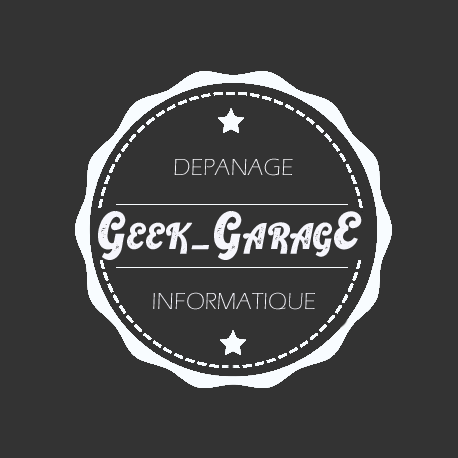
<style>
.page{position:relative;width:458px;height:458px;background:#333333}
.page>*{position:absolute;margin:0}
.t1{font:24px "ErasITC-Light";color:#f7f7fa;font-variant:small-caps}
.t2{font:51.6px "RetrokingRegular";color:#f6f6fc;font-variant:small-caps}
.t3{font:24px "ErasITC-Light";color:#f6f6fc;font-variant:small-caps}
</style>
<div class="page">
<p class="t1" style="left:174px;top:158px;width:119px;height:18px">DEPANAGE</p>
<p class="t2" style="left:98px;top:211px;width:264px;height:49px">Geek_GaragE</p>
<p class="t3" style="left:153px;top:292px;width:162px;height:18px">INFORMATIQUE</p>
</div>
